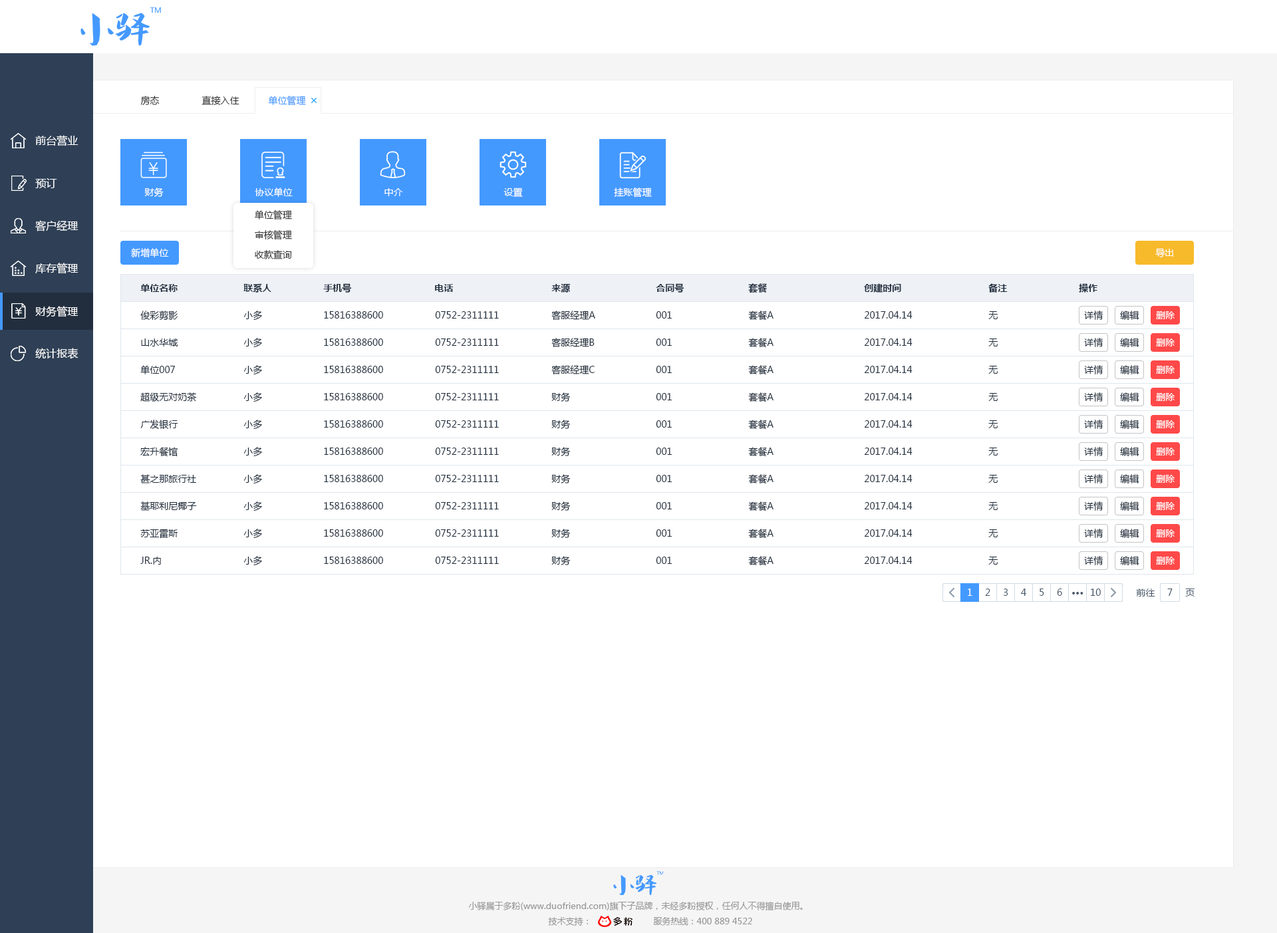
<style>
.page{position:relative;width:1277px;height:933px;background:#ffffff}
.page>*{position:absolute;margin:0}
.t1{font:9.3px "MicrosoftYaHei";color:#333333}
.t2{font:9.3px "MicrosoftYaHei";color:#4499ff}
.t3{font:10.6px "MicrosoftYaHei";color:#ffffff}
.t4{font:9.3px "MicrosoftYaHei";color:#ffffff}
.t5{font:9.3px "MicrosoftYaHei-Bold";color:#1f2d3d}
.t6{font:9.3px "MicrosoftYaHei";color:#1f2d3d}
.t7{font:9.3px "MicrosoftYaHei";color:#48576a}
.t8{font:9.3px "MicrosoftYaHei-Bold";color:#48576a}
.t9{font:8.6px "MicrosoftYaHei";color:#999999}
</style>
<div class="page">
<p class="t1" style="left:140px;top:96px;width:20px;height:9px">房态</p>
<p class="t1" style="left:202px;top:96px;width:38px;height:9px">直接入住</p>
<p class="t2" style="left:268px;top:96px;width:38px;height:10px">单位管理</p>
<p class="t3" style="left:35px;top:135px;width:44px;height:11px">前台营业</p>
<p class="t3" style="left:35px;top:178px;width:22px;height:10px">预订</p>
<p class="t4" style="left:144px;top:188px;width:20px;height:9px">财务</p>
<p class="t4" style="left:255px;top:188px;width:38px;height:9px">协议单位</p>
<p class="t4" style="left:385px;top:188px;width:18px;height:8px">中介</p>
<p class="t4" style="left:504px;top:188px;width:19px;height:9px">设置</p>
<p class="t4" style="left:614px;top:188px;width:38px;height:10px">挂账管理</p>
<p class="t3" style="left:35px;top:220px;width:44px;height:12px">客户经理</p>
<p class="t1" style="left:255px;top:210px;width:37px;height:10px">单位管理</p>
<p class="t1" style="left:255px;top:230px;width:37px;height:10px">审核管理</p>
<p class="t4" style="left:131px;top:248px;width:38px;height:9px">新增单位</p>
<p class="t1" style="left:255px;top:250px;width:37px;height:9px">收款查询</p>
<p class="t4" style="left:1156px;top:248px;width:18px;height:9px">导出</p>
<p class="t3" style="left:35px;top:263px;width:44px;height:11px">库存管理</p>
<p class="t5" style="left:140px;top:284px;width:38px;height:8px">单位名称</p>
<p class="t5" style="left:244px;top:283px;width:27px;height:10px">联系人</p>
<p class="t5" style="left:323px;top:283px;width:28px;height:10px">手机号</p>
<p class="t5" style="left:435px;top:284px;width:19px;height:8px">电话</p>
<p class="t5" style="left:552px;top:283px;width:18px;height:10px">来源</p>
<p class="t5" style="left:656px;top:283px;width:28px;height:10px">合同号</p>
<p class="t5" style="left:748px;top:283px;width:19px;height:10px">套餐</p>
<p class="t5" style="left:864px;top:283px;width:38px;height:10px">创建时间</p>
<p class="t5" style="left:989px;top:283px;width:19px;height:10px">备注</p>
<p class="t5" style="left:1079px;top:283px;width:19px;height:10px">操作</p>
<p class="t3" style="left:35px;top:306px;width:44px;height:11px">财务管理</p>
<p class="t6" style="left:140px;top:311px;width:38px;height:10px">俊彩剪影</p>
<p class="t6" style="left:244px;top:311px;width:18px;height:10px">小多</p>
<p class="t6" style="left:324px;top:311px;width:59px;height:8px">15816388600</p>
<p class="t6" style="left:435px;top:311px;width:64px;height:8px">0752-2311111</p>
<p class="t6" style="left:552px;top:311px;width:43px;height:9px">客服经理A</p>
<p class="t6" style="left:656px;top:311px;width:16px;height:8px">001</p>
<p class="t6" style="left:748px;top:311px;width:26px;height:10px">套餐A</p>
<p class="t6" style="left:864px;top:311px;width:49px;height:8px">2017.04.14</p>
<p class="t6" style="left:989px;top:311px;width:9px;height:8px">无</p>
<p class="t6" style="left:1084px;top:311px;width:20px;height:9px">详情</p>
<p class="t6" style="left:1120px;top:311px;width:20px;height:9px">编辑</p>
<p class="t4" style="left:1156px;top:311px;width:20px;height:8px">删除</p>
<p class="t6" style="left:141px;top:339px;width:37px;height:8px">山水华城</p>
<p class="t6" style="left:244px;top:338px;width:18px;height:10px">小多</p>
<p class="t6" style="left:324px;top:339px;width:59px;height:7px">15816388600</p>
<p class="t6" style="left:435px;top:339px;width:64px;height:7px">0752-2311111</p>
<p class="t6" style="left:552px;top:338px;width:43px;height:9px">客服经理B</p>
<p class="t6" style="left:656px;top:339px;width:16px;height:7px">001</p>
<p class="t6" style="left:748px;top:338px;width:26px;height:10px">套餐A</p>
<p class="t6" style="left:864px;top:339px;width:49px;height:7px">2017.04.14</p>
<p class="t6" style="left:989px;top:339px;width:9px;height:8px">无</p>
<p class="t6" style="left:1084px;top:338px;width:20px;height:9px">详情</p>
<p class="t6" style="left:1120px;top:338px;width:20px;height:9px">编辑</p>
<p class="t4" style="left:1156px;top:339px;width:20px;height:8px">删除</p>
<p class="t3" style="left:35px;top:348px;width:44px;height:11px">统计报表</p>
<p class="t6" style="left:140px;top:365px;width:35px;height:10px">单位007</p>
<p class="t6" style="left:244px;top:365px;width:18px;height:10px">小多</p>
<p class="t6" style="left:324px;top:366px;width:59px;height:7px">15816388600</p>
<p class="t6" style="left:435px;top:366px;width:64px;height:7px">0752-2311111</p>
<p class="t6" style="left:552px;top:365px;width:43px;height:10px">客服经理C</p>
<p class="t6" style="left:656px;top:366px;width:16px;height:7px">001</p>
<p class="t6" style="left:748px;top:365px;width:26px;height:10px">套餐A</p>
<p class="t6" style="left:864px;top:366px;width:49px;height:7px">2017.04.14</p>
<p class="t6" style="left:989px;top:366px;width:9px;height:8px">无</p>
<p class="t6" style="left:1084px;top:365px;width:20px;height:10px">详情</p>
<p class="t6" style="left:1120px;top:365px;width:20px;height:10px">编辑</p>
<p class="t4" style="left:1156px;top:366px;width:20px;height:8px">删除</p>
<p class="t6" style="left:140px;top:393px;width:57px;height:9px">超级无对奶茶</p>
<p class="t6" style="left:244px;top:393px;width:18px;height:10px">小多</p>
<p class="t6" style="left:324px;top:393px;width:59px;height:8px">15816388600</p>
<p class="t6" style="left:435px;top:393px;width:64px;height:8px">0752-2311111</p>
<p class="t6" style="left:552px;top:393px;width:19px;height:9px">财务</p>
<p class="t6" style="left:656px;top:393px;width:16px;height:8px">001</p>
<p class="t6" style="left:748px;top:393px;width:26px;height:10px">套餐A</p>
<p class="t6" style="left:864px;top:393px;width:49px;height:8px">2017.04.14</p>
<p class="t6" style="left:989px;top:393px;width:9px;height:8px">无</p>
<p class="t6" style="left:1084px;top:393px;width:20px;height:9px">详情</p>
<p class="t6" style="left:1120px;top:393px;width:20px;height:9px">编辑</p>
<p class="t4" style="left:1156px;top:393px;width:20px;height:8px">删除</p>
<p class="t6" style="left:140px;top:420px;width:38px;height:9px">广发银行</p>
<p class="t6" style="left:244px;top:420px;width:18px;height:10px">小多</p>
<p class="t6" style="left:324px;top:420px;width:59px;height:8px">15816388600</p>
<p class="t6" style="left:435px;top:420px;width:64px;height:8px">0752-2311111</p>
<p class="t6" style="left:552px;top:420px;width:19px;height:9px">财务</p>
<p class="t6" style="left:656px;top:420px;width:16px;height:8px">001</p>
<p class="t6" style="left:748px;top:420px;width:26px;height:10px">套餐A</p>
<p class="t6" style="left:864px;top:420px;width:49px;height:8px">2017.04.14</p>
<p class="t6" style="left:989px;top:420px;width:9px;height:8px">无</p>
<p class="t6" style="left:1084px;top:420px;width:20px;height:9px">详情</p>
<p class="t6" style="left:1120px;top:420px;width:20px;height:9px">编辑</p>
<p class="t4" style="left:1156px;top:420px;width:20px;height:8px">删除</p>
<p class="t6" style="left:140px;top:447px;width:38px;height:10px">宏升餐馆</p>
<p class="t6" style="left:244px;top:447px;width:18px;height:10px">小多</p>
<p class="t6" style="left:324px;top:448px;width:59px;height:7px">15816388600</p>
<p class="t6" style="left:435px;top:448px;width:64px;height:7px">0752-2311111</p>
<p class="t6" style="left:552px;top:447px;width:19px;height:9px">财务</p>
<p class="t6" style="left:656px;top:448px;width:16px;height:7px">001</p>
<p class="t6" style="left:748px;top:447px;width:26px;height:10px">套餐A</p>
<p class="t6" style="left:864px;top:448px;width:49px;height:7px">2017.04.14</p>
<p class="t6" style="left:989px;top:448px;width:9px;height:8px">无</p>
<p class="t6" style="left:1084px;top:447px;width:20px;height:9px">详情</p>
<p class="t6" style="left:1120px;top:447px;width:20px;height:9px">编辑</p>
<p class="t4" style="left:1156px;top:448px;width:20px;height:8px">删除</p>
<p class="t6" style="left:140px;top:474px;width:56px;height:10px">甚之那旅行社</p>
<p class="t6" style="left:244px;top:474px;width:18px;height:10px">小多</p>
<p class="t6" style="left:324px;top:475px;width:59px;height:7px">15816388600</p>
<p class="t6" style="left:435px;top:475px;width:64px;height:7px">0752-2311111</p>
<p class="t6" style="left:552px;top:474px;width:19px;height:10px">财务</p>
<p class="t6" style="left:656px;top:475px;width:16px;height:7px">001</p>
<p class="t6" style="left:748px;top:474px;width:26px;height:10px">套餐A</p>
<p class="t6" style="left:864px;top:475px;width:49px;height:7px">2017.04.14</p>
<p class="t6" style="left:989px;top:475px;width:9px;height:8px">无</p>
<p class="t6" style="left:1084px;top:474px;width:20px;height:10px">详情</p>
<p class="t6" style="left:1120px;top:474px;width:20px;height:10px">编辑</p>
<p class="t4" style="left:1156px;top:475px;width:20px;height:8px">删除</p>
<p class="t6" style="left:140px;top:502px;width:57px;height:9px">基耶利尼椰子</p>
<p class="t6" style="left:244px;top:502px;width:18px;height:10px">小多</p>
<p class="t6" style="left:324px;top:502px;width:59px;height:8px">15816388600</p>
<p class="t6" style="left:435px;top:502px;width:64px;height:8px">0752-2311111</p>
<p class="t6" style="left:552px;top:502px;width:19px;height:9px">财务</p>
<p class="t6" style="left:656px;top:502px;width:16px;height:8px">001</p>
<p class="t6" style="left:748px;top:502px;width:26px;height:10px">套餐A</p>
<p class="t6" style="left:864px;top:502px;width:49px;height:8px">2017.04.14</p>
<p class="t6" style="left:989px;top:502px;width:9px;height:8px">无</p>
<p class="t6" style="left:1084px;top:502px;width:20px;height:9px">详情</p>
<p class="t6" style="left:1120px;top:502px;width:20px;height:9px">编辑</p>
<p class="t4" style="left:1156px;top:502px;width:20px;height:8px">删除</p>
<p class="t6" style="left:140px;top:529px;width:38px;height:10px">苏亚雷斯</p>
<p class="t6" style="left:244px;top:529px;width:18px;height:10px">小多</p>
<p class="t6" style="left:324px;top:530px;width:59px;height:7px">15816388600</p>
<p class="t6" style="left:435px;top:530px;width:64px;height:7px">0752-2311111</p>
<p class="t6" style="left:552px;top:529px;width:19px;height:9px">财务</p>
<p class="t6" style="left:656px;top:530px;width:16px;height:7px">001</p>
<p class="t6" style="left:748px;top:529px;width:26px;height:10px">套餐A</p>
<p class="t6" style="left:864px;top:530px;width:49px;height:7px">2017.04.14</p>
<p class="t6" style="left:989px;top:530px;width:9px;height:8px">无</p>
<p class="t6" style="left:1084px;top:529px;width:20px;height:9px">详情</p>
<p class="t6" style="left:1120px;top:529px;width:20px;height:9px">编辑</p>
<p class="t4" style="left:1156px;top:530px;width:20px;height:8px">删除</p>
<p class="t6" style="left:140px;top:557px;width:21px;height:8px">JR.内</p>
<p class="t6" style="left:244px;top:556px;width:18px;height:10px">小多</p>
<p class="t6" style="left:324px;top:557px;width:59px;height:7px">15816388600</p>
<p class="t6" style="left:435px;top:557px;width:64px;height:7px">0752-2311111</p>
<p class="t6" style="left:552px;top:556px;width:19px;height:10px">财务</p>
<p class="t6" style="left:656px;top:557px;width:16px;height:7px">001</p>
<p class="t6" style="left:748px;top:556px;width:26px;height:10px">套餐A</p>
<p class="t6" style="left:864px;top:557px;width:49px;height:7px">2017.04.14</p>
<p class="t6" style="left:989px;top:557px;width:9px;height:8px">无</p>
<p class="t6" style="left:1084px;top:556px;width:20px;height:10px">详情</p>
<p class="t6" style="left:1120px;top:556px;width:20px;height:10px">编辑</p>
<p class="t4" style="left:1156px;top:557px;width:20px;height:8px">删除</p>
<p class="t4" style="left:968px;top:589px;width:5px;height:7px">1</p>
<p class="t7" style="left:985px;top:589px;width:6px;height:7px">2</p>
<p class="t7" style="left:1003px;top:589px;width:6px;height:7px">3</p>
<p class="t7" style="left:1021px;top:589px;width:6px;height:7px">4</p>
<p class="t7" style="left:1040px;top:589px;width:5px;height:7px">5</p>
<p class="t7" style="left:1057px;top:589px;width:6px;height:7px">6</p>
<p class="t8" style="left:1073px;top:592px;width:11px;height:3px">···</p>
<p class="t7" style="left:1091px;top:589px;width:10px;height:7px">10</p>
<p class="t7" style="left:1136px;top:589px;width:20px;height:8px">前往</p>
<p class="t7" style="left:1168px;top:589px;width:5px;height:7px">7</p>
<p class="t7" style="left:1186px;top:589px;width:9px;height:8px">页</p>
<p class="t9" style="left:468px;top:902px;width:335px;height:9px">小驿属于多粉(www.duofriend.com)旗下子品牌，未经多粉授权，任何人不得擅自使用。</p>
<p class="t9" style="left:548px;top:917px;width:40px;height:9px">技术支持：</p>
<p class="t9" style="left:653px;top:917px;width:99px;height:9px">服务热线：400 889 4522</p>
</div>
